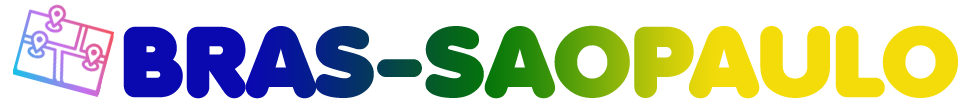
<style>
.page{position:relative;width:970px;height:107px;background:#ffffff}
.page>*{position:absolute;margin:0}
.t1{font:97.9px "Volkswagen-Serial-Black-Regular"}
</style>
<div class="page">
<p class="t1" style="left:123px;top:25px;width:835px;height:74px">BRAS-SAOPAULO</p>
</div>
